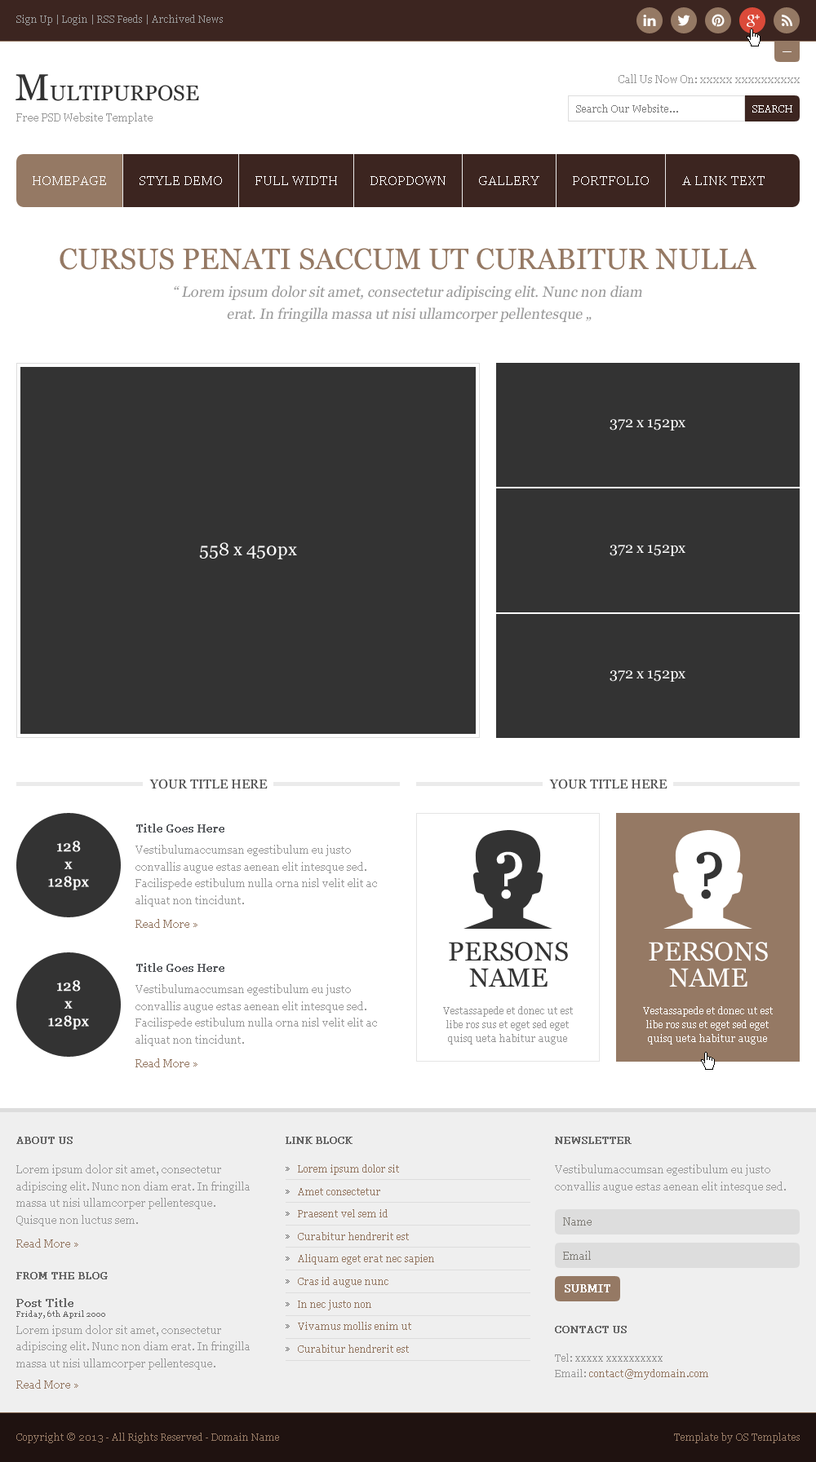
<style>
.page{position:relative;width:816px;height:1462px;background:#ffffff}
.page>*{position:absolute;margin:0}
.t1{font:9.8px "Georgia";color:#999999}
.t2{font:21.2px "Georgia";color:#333333}
.t3{font:37.5px "Georgia";color:#333333}
.t4{font:10.6px "Georgia";color:#999999}
.t5{font:9.8px "Georgia";color:#7f7f7f}
.t6{font:9.8px "Georgia";color:#ffffff}
.t7{font:13px "Georgia";color:#ffffff}
.t8{font:29.4px "Georgia";color:#957964}
.t9{font:14.7px/22px "Georgia";color:#999999;font-style:italic}
.t10{font:14.7px/14.7px "Georgia";color:#999999;font-style:italic}
.t11{font:14.7px "Georgia";color:#ffffff}
.t12{font:17.9px "Georgia";color:#ffffff}
.t13{font:13px "Georgia";color:#4a4a4a}
.t14{font:10.6px "Georgia";color:#585b5f;font-weight:bold}
.t15{font:14.7px/17.6px "Georgia";color:#ffffff;font-weight:bold}
.t16{font:10.6px/17px "Georgia";color:#999999}
.t17{font:64.4px "Georgia";color:#ffffff;font-weight:bold}
.t18{font:64.4px "Georgia";color:#353535;font-weight:bold}
.t19{font:10.6px "Georgia";color:#957964}
.t20{font:26.1px/26.1px "Georgia";color:#333333}
.t21{font:26.1px/26.1px "Georgia";color:#ffffff}
.t22{font:9.8px/13.7px "Georgia";color:#979797}
.t23{font:9.8px/13.7px "Georgia";color:#ffffff}
.t24{font:9.8px "Georgia";color:#666666;font-weight:bold}
.t25{font:9.8px/22.5px "Georgia";color:#666666}
.t26{font:9.8px/22.5px "Georgia";color:#957964}
.t27{font:10.6px "Georgia";color:#807d77}
.t28{font:10.6px "Georgia";color:#ffffff;font-weight:bold}
.t29{font:11.4px/13.7px "Georgia";color:#666666;font-weight:bold}
.t30{font:8.2px/9.8px "Georgia";color:#666666}
.t31{font:9.8px/15.7px "Georgia";color:#999999}
.t32{font:9.8px/15.7px "Georgia";color:#957964}
.t33{font:9.8px "Georgia";color:#957964}
</style>
<div class="page">
<p class="t1" style="left:16px;top:15px;width:207px;height:10px">Sign Up | Login | RSS Feeds | Archived News</p>
<p class="t2" style="left:15px;top:74px;width:184px;height:27px"><span class="t3">M</span>ULTIPURPOSE</p>
<p class="t4" style="left:618px;top:74px;width:181px;height:9px">Call Us Now On: xxxxx xxxxxxxxxx</p>
<p class="t4" style="left:16px;top:113px;width:136px;height:11px">Free PSD Website Template</p>
<p class="t5" style="left:576px;top:104px;width:102px;height:9px">Search Our Website...</p>
<p class="t6" style="left:752px;top:105px;width:40px;height:8px">SEARCH</p>
<p class="t7" style="left:33px;top:176px;width:73px;height:9px">HOMEPAGE</p>
<p class="t7" style="left:139px;top:176px;width:83px;height:9px">STYLE DEMO</p>
<p class="t7" style="left:255px;top:176px;width:82px;height:9px">FULL WIDTH</p>
<p class="t7" style="left:370px;top:176px;width:75px;height:9px">DROPDOWN</p>
<p class="t7" style="left:479px;top:176px;width:60px;height:9px">GALLERY</p>
<p class="t7" style="left:572px;top:176px;width:76px;height:9px">PORTFOLIO</p>
<p class="t7" style="left:682px;top:176px;width:82px;height:9px">A LINK TEXT</p>
<p class="t8" style="left:60px;top:248px;width:696px;height:22px">CURSUS PENATI SACCUM UT CURABITUR NULLA</p>
<p class="t9" style="left:174px;top:285px;width:468px;height:37px;text-align:center"><span class="t10">“</span> Lorem ipsum dolor sit amet, consectetur adipiscing elit. Nunc non diam <br>erat. In fringilla massa ut nisi ullamcorper pellentesque „</p>
<p class="t11" style="left:609px;top:419px;width:76px;height:12px">372 x 152px</p>
<p class="t12" style="left:199px;top:542px;width:98px;height:17px">558 x 450px</p>
<p class="t11" style="left:609px;top:545px;width:76px;height:11px">372 x 152px</p>
<p class="t11" style="left:609px;top:670px;width:76px;height:12px">372 x 152px</p>
<p class="t13" style="left:149px;top:779px;width:118px;height:10px">YOUR TITLE HERE</p>
<p class="t13" style="left:549px;top:779px;width:118px;height:10px">YOUR TITLE HERE</p>
<p class="t14" style="left:136px;top:824px;width:88px;height:9px">Title Goes Here</p>
<p class="t15" style="left:48px;top:841px;width:41px;height:50px;text-align:center">128<br>x<br>128px</p>
<p class="t16" style="left:135px;top:845px;width:242px;height:62px">Vestibulumaccumsan egestibulum eu justo convallis augue estas aenean elit intesque sed. Facilispede estibulum nulla orna nisl velit elit ac aliquat non tincidunt.</p>
<p class="t17" style="left:496px;top:851px;width:26px;height:49px">?</p>
<p class="t18" style="left:696px;top:851px;width:26px;height:49px">?</p>
<p class="t19" style="left:135px;top:919px;width:62px;height:9px">Read More »</p>
<p class="t20" style="left:449px;top:942px;width:119px;height:46px;text-align:center">PERSONS<br>NAME</p>
<p class="t21" style="left:648px;top:942px;width:119px;height:46px;text-align:center">PERSONS<br>NAME</p>
<p class="t14" style="left:136px;top:963px;width:88px;height:9px">Title Goes Here</p>
<p class="t15" style="left:48px;top:980px;width:41px;height:50px;text-align:center">128<br>x<br>128px</p>
<p class="t16" style="left:135px;top:984px;width:242px;height:62px">Vestibulumaccumsan egestibulum eu justo convallis augue estas aenean elit intesque sed. Facilispede estibulum nulla orna nisl velit elit ac aliquat non tincidunt.</p>
<p class="t22" style="left:443px;top:1006px;width:129px;height:39px;text-align:center">Vestassapede et donec ut est libe ros sus et eget sed eget quisq ueta habitur augue</p>
<p class="t23" style="left:643px;top:1006px;width:129px;height:39px;text-align:center">Vestassapede et donec ut est libe ros sus et eget sed eget quisq ueta habitur augue</p>
<p class="t19" style="left:135px;top:1059px;width:62px;height:8px">Read More »</p>
<p class="t24" style="left:16px;top:1137px;width:57px;height:7px">ABOUT US</p>
<p class="t24" style="left:285px;top:1137px;width:67px;height:7px">LINK BLOCK</p>
<p class="t24" style="left:555px;top:1137px;width:76px;height:7px">NEWSLETTER</p>
<p class="t16" style="left:16px;top:1165px;width:234px;height:62px">Lorem ipsum dolor sit amet, consectetur adipiscing elit. Nunc non diam erat. In fringilla massa ut nisi ullamcorper pellentesque. Quisque non luctus sem.</p>
<p class="t25" style="left:285px;top:1167px;width:5px;height:184px">»<br>»<br>»<br>»<br>»<br>»<br>»<br>»<br>»</p>
<p class="t26" style="left:298px;top:1165px;width:136px;height:188px">Lorem ipsum dolor sit<br>Amet consectetur<br>Praesent vel sem id<br>Curabitur hendrerit est<br>Aliquam eget erat nec sapien<br>Cras id augue nunc<br>In nec justo non<br>Vivamus mollis enim ut<br>Curabitur hendrerit est</p>
<p class="t16" style="left:555px;top:1165px;width:230px;height:28px">Vestibulumaccumsan egestibulum eu justo convallis augue estas aenean elit intesque sed.</p>
<p class="t27" style="left:563px;top:1218px;width:28px;height:8px">Name</p>
<p class="t19" style="left:16px;top:1239px;width:62px;height:9px">Read More »</p>
<p class="t27" style="left:563px;top:1251px;width:27px;height:9px">Email</p>
<p class="t24" style="left:16px;top:1272px;width:92px;height:8px">FROM THE BLOG</p>
<p class="t28" style="left:564px;top:1284px;width:46px;height:9px">SUBMIT</p>
<p class="t16" style="left:16px;top:1298px;width:234px;height:72px"><span class="t29">Post Title<br></span><span class="t30">Friday, 6th April 2000<br></span>Lorem ipsum dolor sit amet, consectetur adipiscing elit. Nunc non diam erat. In fringilla massa ut nisi ullamcorper pellentesque.</p>
<p class="t24" style="left:555px;top:1326px;width:71px;height:7px">CONTACT US</p>
<p class="t31" style="left:555px;top:1354px;width:153px;height:26px">Tel: xxxxx xxxxxxxxxx<br>Email: <span class="t32">contact@mydomain.com</span></p>
<p class="t19" style="left:16px;top:1380px;width:62px;height:9px">Read More »</p>
<p class="t33" style="left:16px;top:1433px;width:263px;height:10px">Copyright © 2013 - All Rights Reserved - Domain Name</p>
<p class="t33" style="left:674px;top:1433px;width:125px;height:10px">Template by OS Templates</p>
</div>
